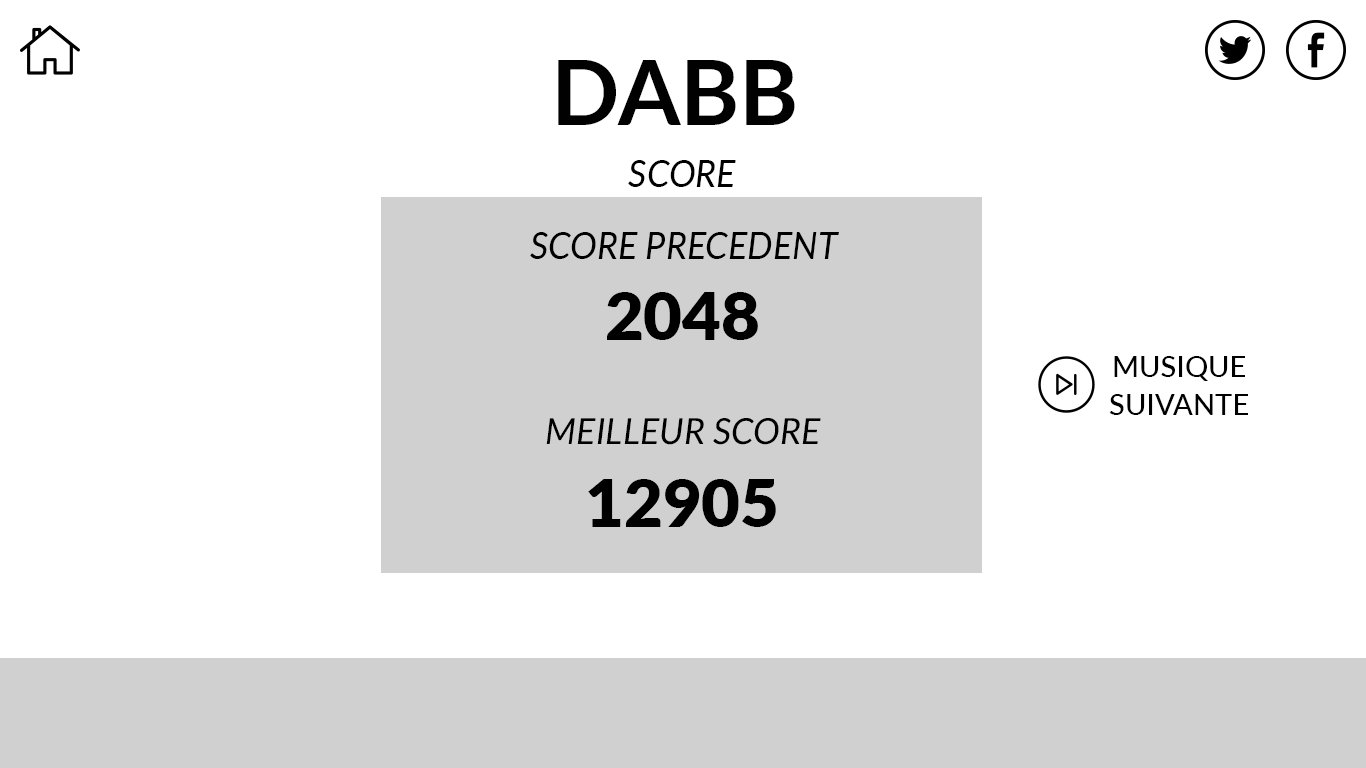
<style>
.page{position:relative;width:1366px;height:768px;background:#ffffff}
.page>*{position:absolute;margin:0}
.t1{font:90px "Lato-Bold";color:#010101}
.t2{font:36px "Lato-Italic";color:#000000}
.t3{font:66.7px "Lato-Black";color:#000000}
.t4{font:29.2px/37.5px "Lato-Medium";color:#000000}
</style>
<div class="page">
<p class="t1" style="left:558px;top:60px;width:237px;height:65px">DABB</p>
<p class="t2" style="left:628px;top:160px;width:108px;height:27px">SCORE</p>
<p class="t2" style="left:530px;top:232px;width:309px;height:27px">SCORE PRECEDENT</p>
<p class="t3" style="left:607px;top:292px;width:151px;height:48px">2048</p>
<p class="t4" style="left:1109px;top:356px;width:139px;height:59px;text-align:center">MUSIQUE<br>SUIVANTE</p>
<p class="t2" style="left:546px;top:418px;width:275px;height:27px">MEILLEUR SCORE</p>
<p class="t3" style="left:588px;top:479px;width:188px;height:48px">12905</p>
</div>
